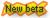
<style>
.page{position:relative;width:50px;height:18px}
.page>*{position:absolute;margin:0}
.t1{font:9px "ArialMT";color:#4e4911}
</style>
<div class="page">
<p class="t1" style="left:6px;top:5px;width:37px;height:7px">New beta</p>
</div>
